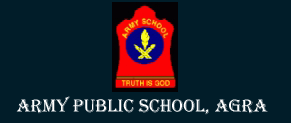
<style>
.page{position:relative;width:291px;height:123px;background:#011d29}
.page>*{position:absolute;margin:0}
.t1{font:18.7px "Algerian";color:#ffffff}
</style>
<div class="page">
<p class="t1" style="left:16px;top:96px;width:252px;height:19px">Army Public school, agra</p>
</div>
